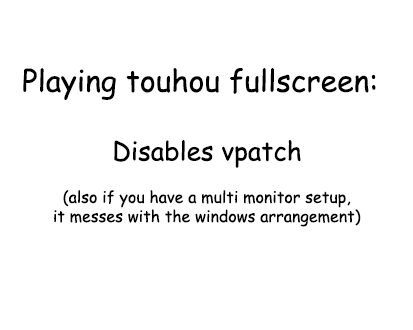
<style>
.page{position:relative;width:413px;height:330px;background:#ffffff}
.page>*{position:absolute;margin:0}
.t1{font:30px "ComicSansMS";color:#000000}
.t2{font:26px "ComicSansMS";color:#000000}
.t3{font:16px "ComicSansMS";color:#000000}
</style>
<div class="page">
<p class="t1" style="left:23px;top:67px;width:353px;height:34px">Playing touhou fullscreen:</p>
<p class="t2" style="left:114px;top:139px;width:187px;height:29px">Disables vpatch</p>
<p class="t3" style="left:54px;top:190px;width:307px;height:37px;text-align:center">(also if you have a multi monitor setup,<br>it messes with the windows arrangement)</p>
</div>
